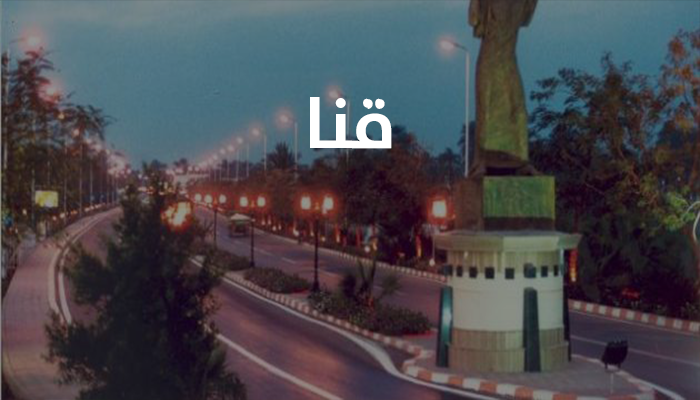
<style>
.page{position:relative;width:700px;height:400px}
.page>*{position:absolute;margin:0}
.t1{font:72px "TheSans-Bold";color:#ffffff}
</style>
<div class="page">
<p class="t1" style="left:310px;top:97px;width:82px;height:52px">قنا</p>
</div>
